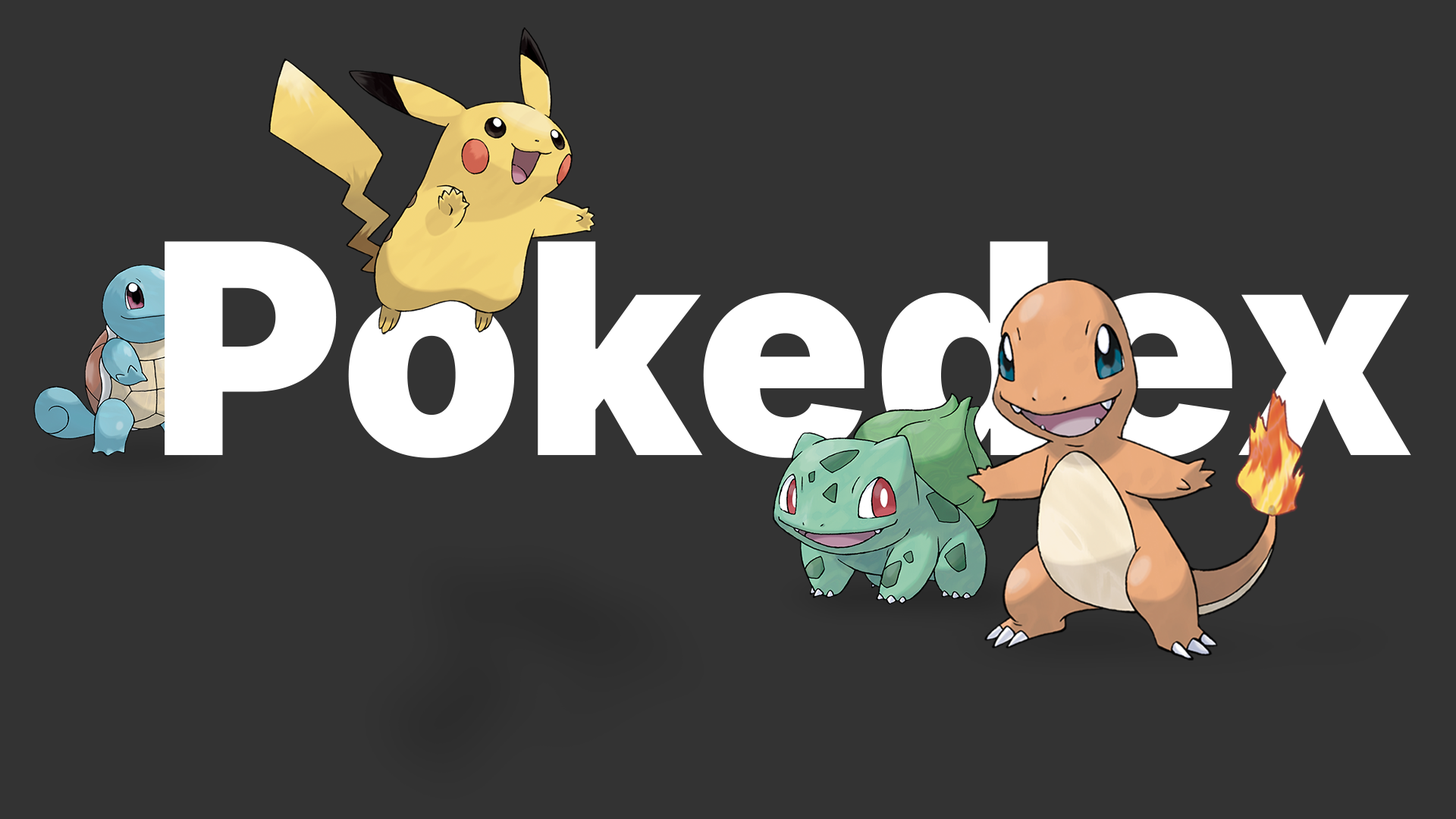
<style>
.page{position:relative;width:1456px;height:819px;background:#333333}
.page>*{position:absolute;margin:0}
.t1{font:293.5px "Inter-Black";color:#ffffff}
</style>
<div class="page">
<p class="t1" style="left:165px;top:241px;width:1246px;height:217px">Pokedex</p>
</div>
